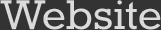
<style>
.page{position:relative;width:161px;height:30px;background:#333333}
.page>*{position:absolute;margin:0}
.t1{font:51px "Rokkitt";color:#dbdbdb}
</style>
<div class="page">
<p class="t1" style="left:0px;top:0px;width:161px;height:30px">Website</p>
</div>
